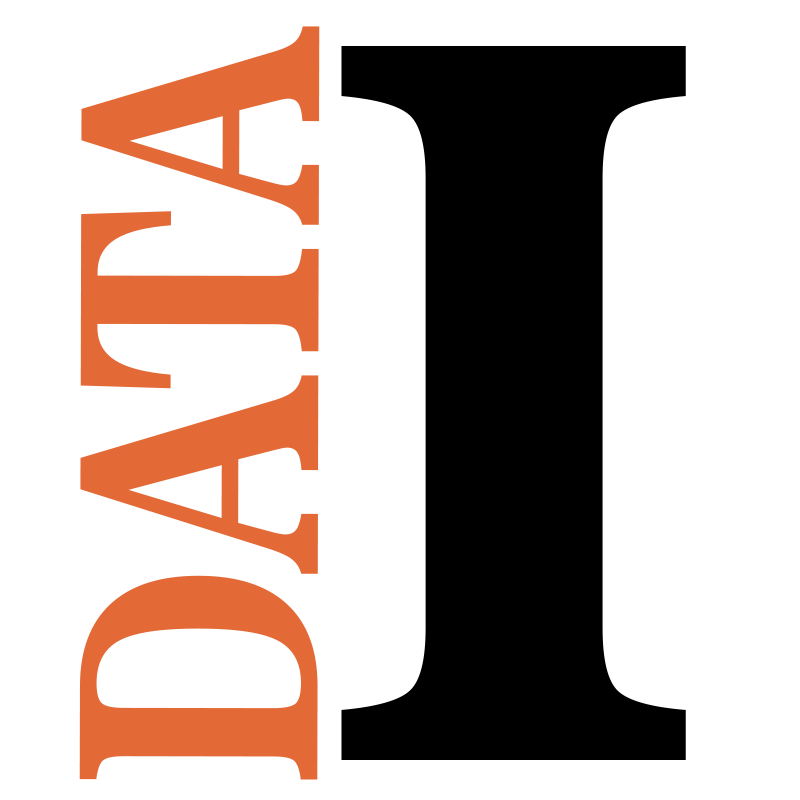
<style>
.page{position:relative;width:800px;height:800px;background:#ffffff}
.page>*{position:absolute;margin:0}
.t1{font:325.6px "News706BT-BoldC";color:#e36937;text-transform:uppercase;scale:0.82 1}
.t2{font:979px "News706BT-BoldC";color:#000000;text-transform:uppercase}
</style>
<div class="page">
<p class="t1" style="left:79px;top:26px;width:241px;height:754px;rotate:-90deg">DATA</p>
<p class="t2" style="left:341px;top:46px;width:345px;height:714px">I</p>
</div>
